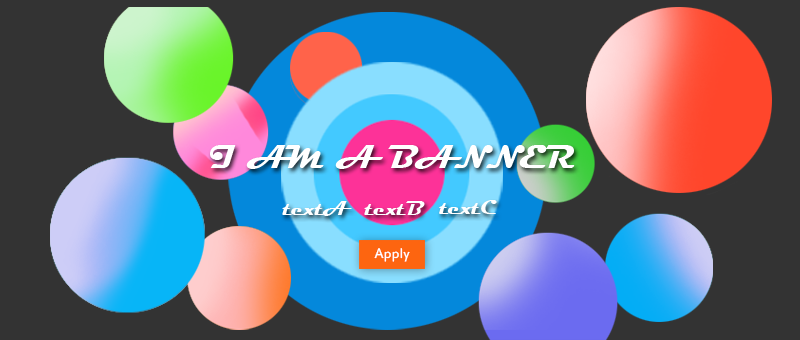
<style>
.page{position:relative;width:800px;height:340px;background:#333333}
.page>*{position:absolute;margin:0}
.t1{font:34.2px "Magneto-Bold";color:#ffffff}
.t2{font:20.9px "Magneto-Bold";color:#ffffff}
.t3{font:15.2px "EstrangeloEdessa";color:#ffffff}
</style>
<div class="page">
<p class="t1" style="left:210px;top:145px;width:365px;height:24px">I AM A BANNER</p>
<p class="t2" style="left:282px;top:201px;width:70px;height:15px">textA</p>
<p class="t2" style="left:364px;top:201px;width:61px;height:14px">textB</p>
<p class="t2" style="left:439px;top:200px;width:58px;height:14px">textC</p>
<p class="t3" style="left:374px;top:248px;width:36px;height:14px">Apply</p>
</div>
